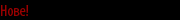
<style>
.page{position:relative;width:180px;height:20px;background:#000000}
.page>*{position:absolute;margin:0}
.t1{font:16px "MyriadPro-Cond";color:#990000}
</style>
<div class="page">
<p class="t1" style="left:1px;top:5px;width:28px;height:11px">Нове!</p>
</div>
